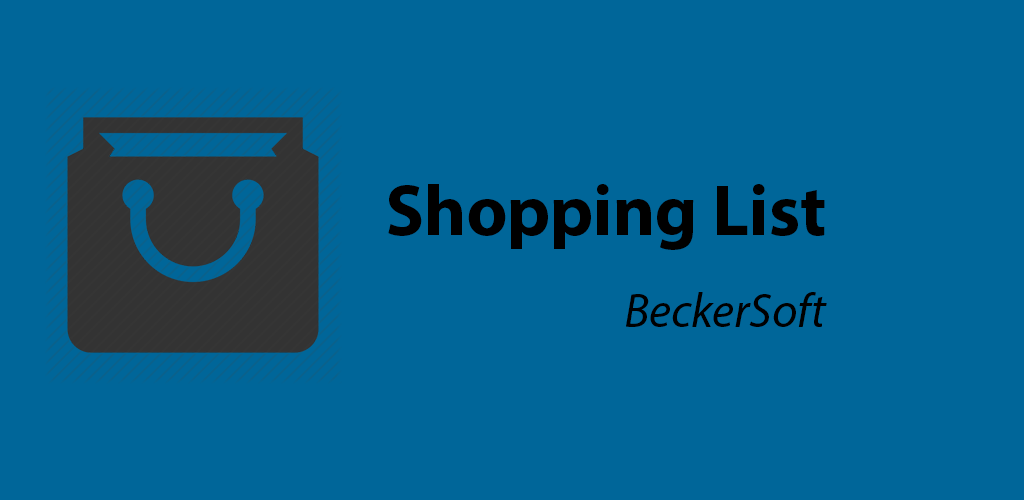
<style>
.page{position:relative;width:1024px;height:500px;background:#006699}
.page>*{position:absolute;margin:0}
.t1{font:72px "MyriadPro-Bold";color:#000000}
.t2{font:48px "MyriadPro-It";color:#000000}
</style>
<div class="page">
<p class="t1" style="left:388px;top:184px;width:437px;height:66px">Shopping List</p>
<p class="t2" style="left:626px;top:292px;width:201px;height:35px">BeckerSoft</p>
</div>
